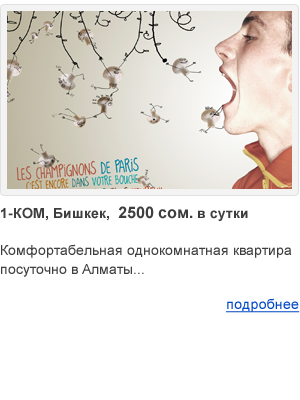
<style>
.page{position:relative;width:300px;height:400px;background:#ffffff}
.page>*{position:absolute;margin:0}
.t1{font:14px/18.4px "ArialMT";color:#3e3e3e}
.t2{font:14px/18.4px "Arial-BoldMT";color:#3e3e3e}
.t3{font:16px/18.4px "Arial-BoldMT";color:#3e3e3e}
.t4{font:14px "ArialMT";color:#0046c6;text-decoration:underline}
</style>
<div class="page">
<p class="t1" style="left:1px;top:206px;width:299px;height:107px"><span class="t2">1-КОМ, Бишкек,  </span><span class="t3">2500 сом.</span><span class="t2"> в сутки<br></span><br>Комфортабельная однокомнатная квартира посуточно в Алматы...<br><br><span class="t4">подробнее</span></p>
</div>
